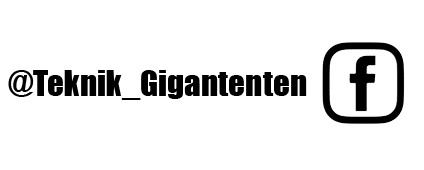
<style>
.page{position:relative;width:424px;height:170px;background:#ffffff}
.page>*{position:absolute;margin:0}
.t1{font:33px "Impact";color:#000000}
</style>
<div class="page">
<p class="t1" style="left:8px;top:70px;width:299px;height:30px">@Teknik_Gigantenten</p>
</div>
